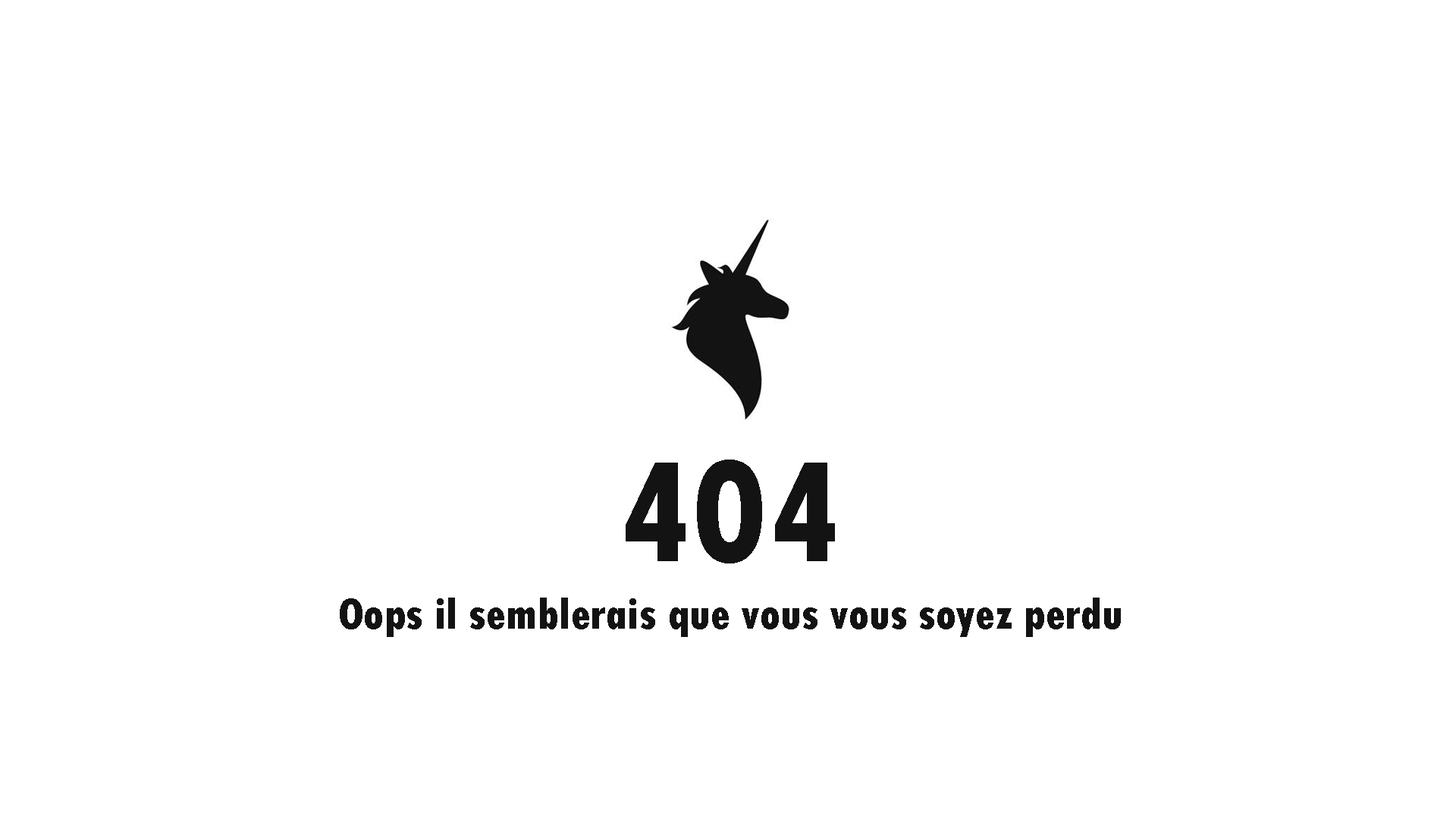
<style>
.page{position:relative;width:1456px;height:819px;background:#ffffff}
.page>*{position:absolute;margin:0}
.t1{font:151.7px "TwCenMT-CondensedExtraBold";color:#131313}
.t2{font:45.5px "TwCenMT-CondensedExtraBold";color:#131313}
</style>
<div class="page">
<p class="t1" style="left:626px;top:460px;width:209px;height:103px">404</p>
<p class="t2" style="left:340px;top:598px;width:781px;height:39px">Oops il semblerais que vous vous soyez perdu</p>
</div>
